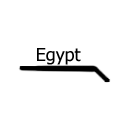
<style>
.page{position:relative;width:128px;height:128px;background:#ffffff}
.page>*{position:absolute;margin:0}
.t1{font:17.9px "Tahoma";color:#000000}
</style>
<div class="page">
<p class="t1" style="left:37px;top:48px;width:44px;height:17px">Egypt</p>
</div>
